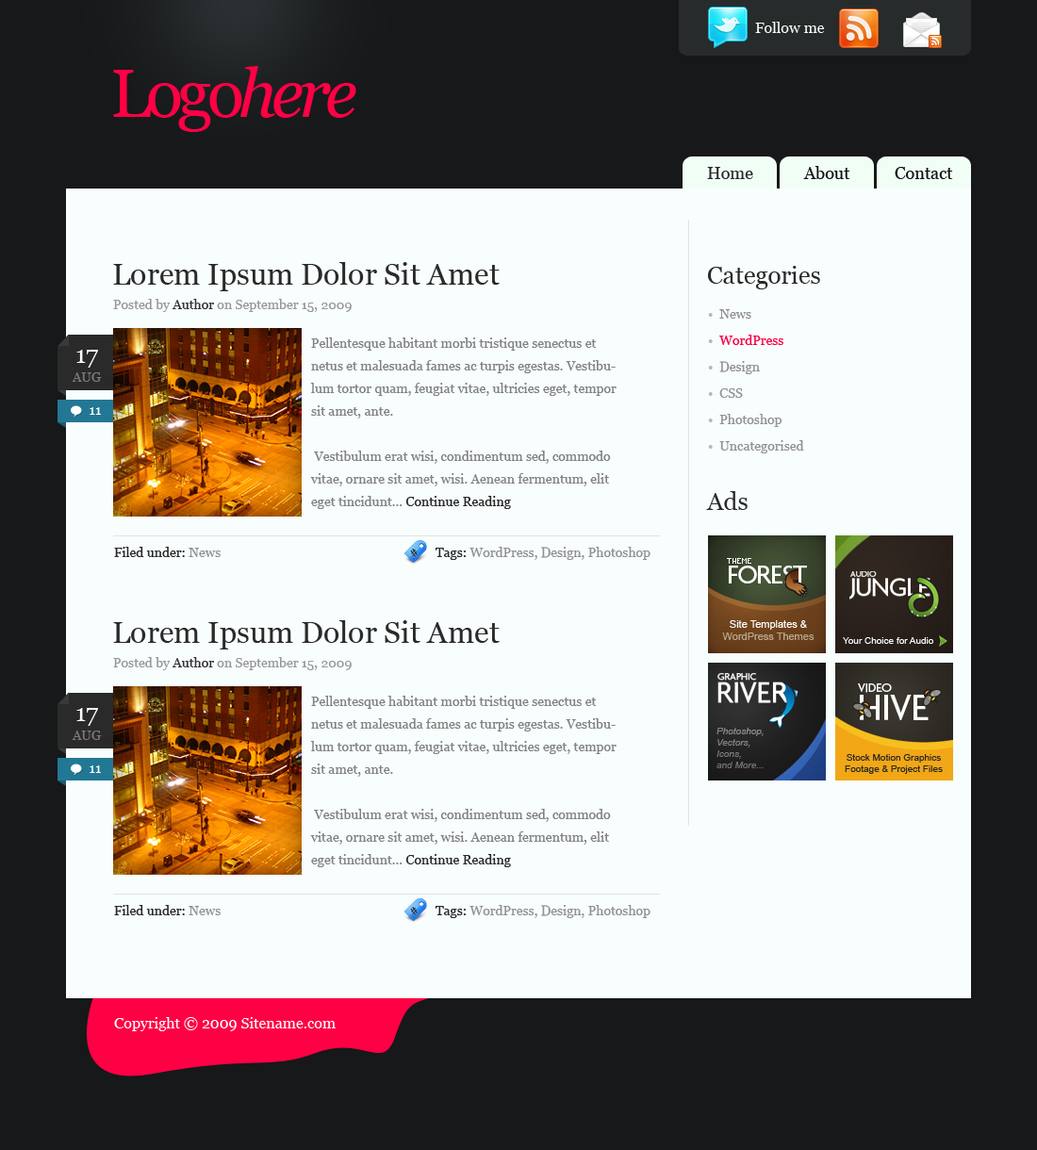
<style>
.page{position:relative;width:1037px;height:1150px;background:#f8fdfe}
.page>*{position:absolute;margin:0}
.t1{font:15.1px "Georgia";color:#f1fef5}
.t2{font:67.9px "Georgia";letter-spacing:-0.075em;color:#ff0045}
.t3{font:67.9px "Georgia-Italic";letter-spacing:-0.075em;color:#ff0045}
.t4{font:17px "Georgia";color:#2a2a2a}
.t5{font:17px "Georgia";color:#111111}
.t6{font:30.2px "Georgia";color:#2a2a2a}
.t7{font:24.5px "Georgia";color:#2a2a2a}
.t8{font:13.2px "Georgia";color:#999999}
.t9{font:13.2px "Georgia";color:#333333}
.t10{font:13.2px/26.4px "Georgia";color:#929293}
.t11{font:13.2px/26.4px "Georgia";color:#b8b8b8}
.t12{font:13.2px/26.4px "Georgia";color:#ff0045}
.t13{font:13.2px/26.4px "Georgia";color:#b9b9b9}
.t14{font:13.2px/22.6px "Georgia";color:#828282}
.t15{font:13.2px/22.6px "Georgia";color:#2a2a2a}
.t16{font:13.2px/18.9px "Georgia";color:#7a7a7a}
.t17{font:24.5px/18.9px "Georgia";color:#ffffff}
.t18{font:14.1px "Georgia";color:#ffffff}
.t19{font:13.2px "Georgia";color:#929292}
.t20{font:13.2px "Georgia";color:#2a2a2a}
.t21{font:15.1px "Georgia";color:#ffffff}
</style>
<div class="page">
<p class="t1" style="left:755px;top:22px;width:70px;height:11px">Follow me</p>
<p class="t2" style="left:113px;top:66px;width:243px;height:66px">Logo<span class="t3">here</span></p>
<p class="t4" style="left:707px;top:167px;width:46px;height:12px">Home</p>
<p class="t5" style="left:803px;top:166px;width:47px;height:13px">About</p>
<p class="t5" style="left:895px;top:167px;width:58px;height:12px">Contact</p>
<p class="t6" style="left:113px;top:262px;width:387px;height:29px">Lorem Ipsum Dolor Sit Amet</p>
<p class="t7" style="left:708px;top:266px;width:112px;height:23px">Categories</p>
<p class="t8" style="left:113px;top:299px;width:239px;height:13px">Posted by <span class="t9">Author</span> on September 15, 2009</p>
<p class="t10" style="left:708px;top:309px;width:96px;height:144px"><span class="t11">•</span>  News <br><span class="t11">•  </span><span class="t12">WordPress<br></span><span class="t11">• </span> Design<br><span class="t11">• </span> CSS<br><span class="t11">•</span>  Photoshop<br><span class="t13">•</span>  Uncategorised</p>
<p class="t14" style="left:310px;top:337px;width:306px;height:172px">Pellentesque habitant morbi tristique senectus et netus et malesuada fames ac turpis egestas. Vestibulum tortor quam, feugiat vitae, ultricies eget, tempor sit amet, ante. <br><br> Vestibulum erat wisi, condimentum sed, commodo vitae, ornare sit amet, wisi. Aenean fermentum, elit eget tincidunt... <span class="t15">Continue Reading</span></p>
<p class="t16" style="left:72px;top:350px;width:30px;height:32px;text-align:center"><span class="t17">17<br></span>AUG</p>
<p class="t18" style="left:90px;top:407px;width:11px;height:8px">11</p>
<p class="t7" style="left:706px;top:491px;width:42px;height:19px">Ads</p>
<p class="t19" style="left:114px;top:547px;width:536px;height:13px"><span class="t20">Filed under:</span> News           <span class="t20">Tags: </span>WordPress, Design, Photoshop</p>
<p class="t6" style="left:113px;top:620px;width:387px;height:29px">Lorem Ipsum Dolor Sit Amet</p>
<p class="t8" style="left:113px;top:657px;width:239px;height:13px">Posted by <span class="t9">Author</span> on September 15, 2009</p>
<p class="t14" style="left:310px;top:696px;width:306px;height:171px">Pellentesque habitant morbi tristique senectus et netus et malesuada fames ac turpis egestas. Vestibulum tortor quam, feugiat vitae, ultricies eget, tempor sit amet, ante. <br><br> Vestibulum erat wisi, condimentum sed, commodo vitae, ornare sit amet, wisi. Aenean fermentum, elit eget tincidunt... <span class="t15">Continue Reading</span></p>
<p class="t16" style="left:72px;top:708px;width:30px;height:32px;text-align:center"><span class="t17">17<br></span>AUG</p>
<p class="t18" style="left:90px;top:765px;width:11px;height:8px">11</p>
<p class="t19" style="left:114px;top:905px;width:536px;height:13px"><span class="t20">Filed under:</span> News           <span class="t20">Tags: </span>WordPress, Design, Photoshop</p>
<p class="t21" style="left:114px;top:1017px;width:222px;height:14px">Copyright © 2009 Sitename.com</p>
</div>
